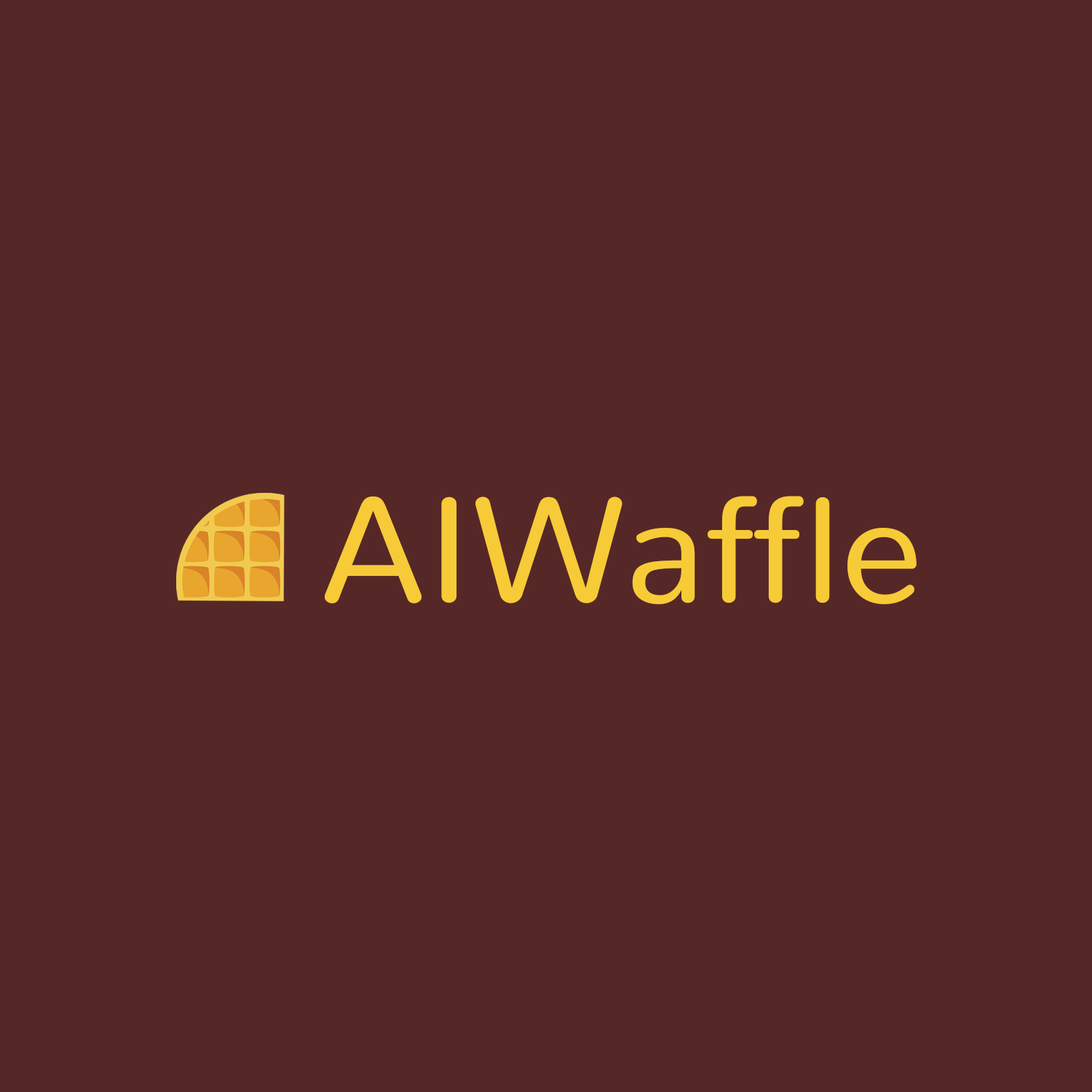
<style>
.page{position:relative;width:1092px;height:1092px;background:#562727}
.page>*{position:absolute;margin:0}
.t1{font:151.7px "Nunito-Regular";color:#f7cb37}
</style>
<div class="page">
<p class="t1" style="left:325px;top:496px;width:592px;height:108px">AIWaffle</p>
</div>
